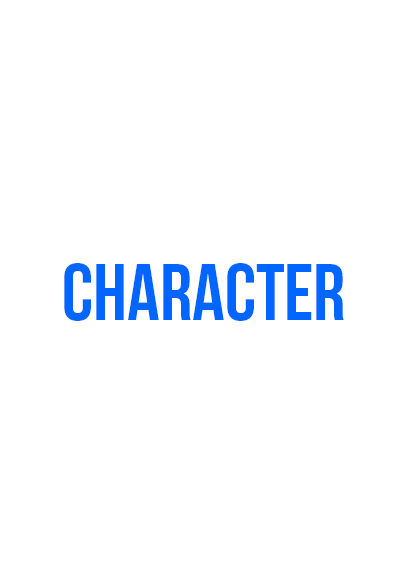
<style>
.page{position:relative;width:408px;height:585px;background:#ffffff}
.page>*{position:absolute;margin:0}
.t1{font:80px "BebasNeue";color:#0066ff}
</style>
<div class="page">
<p class="t1" style="left:64px;top:263px;width:280px;height:58px">character</p>
</div>
